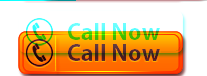
<style>
.page{position:relative;width:207px;height:76px;background:#ffffff}
.page>*{position:absolute;margin:0}
.t1{font:21.3px "AdobeGothicStd-Bold";scale:1.08 1}
</style>
<div class="page">
<p class="t1" style="left:68px;top:23px;width:92px;height:17px">Call Now</p>
</div>
